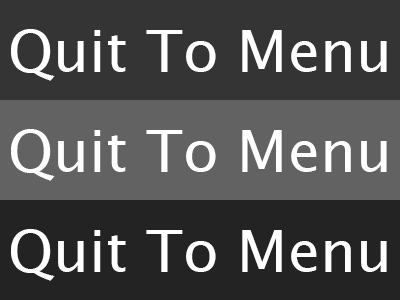
<style>
.page{position:relative;width:400px;height:300px;background:#626262}
.page>*{position:absolute;margin:0}
.t1{font:58.3px "LucidaSans";color:#ffffff}
</style>
<div class="page">
<p class="t1" style="left:11px;top:29px;width:376px;height:52px">Quit To Menu</p>
<p class="t1" style="left:11px;top:129px;width:376px;height:52px">Quit To Menu</p>
<p class="t1" style="left:11px;top:229px;width:376px;height:52px">Quit To Menu</p>
</div>
